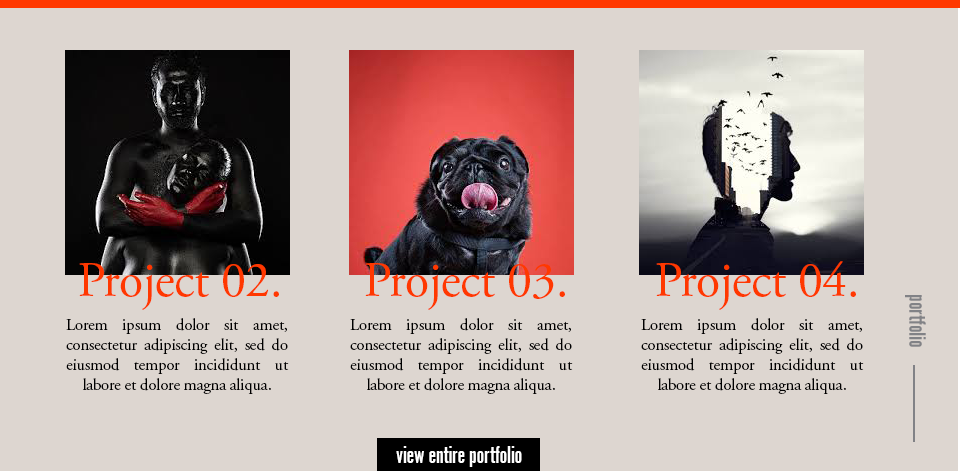
<style>
.page{position:relative;width:960px;height:471px;background:#ddd6d0}
.page>*{position:absolute;margin:0}
.t1{font:50px "AGaramondPro-Regular";letter-spacing:-0.01em;color:#ff3800}
.t2{font:24.9px "AlternateGotNo1D";letter-spacing:-0.01em;color:#818286}
.t3{font:16.7px "AGaramondPro-Regular";letter-spacing:-0.01em;color:#000000}
.t4{font:25px "AlternateGotNo1D";letter-spacing:-0.01em;color:#ffffff}
</style>
<div class="page">
<p class="t1" style="left:79px;top:263px;width:200px;height:47px">Project 02.</p>
<p class="t1" style="left:365px;top:263px;width:200px;height:47px">Project 03.</p>
<p class="t1" style="left:656px;top:261px;width:200px;height:49px">Project 04.</p>
<p class="t2" style="left:905px;top:295px;width:21px;height:52px;rotate:90deg">portfolio</p>
<p class="t3" style="left:66px;top:318px;width:223px;height:76px;text-align:justify">Lorem ipsum dolor sit amet, consectetur adipiscing elit, sed do eiusmod tempor incididunt ut labore et dolore magna aliqua.</p>
<p class="t3" style="left:350px;top:318px;width:223px;height:76px;text-align:justify">Lorem ipsum dolor sit amet, consectetur adipiscing elit, sed do eiusmod tempor incididunt ut labore et dolore magna aliqua.</p>
<p class="t3" style="left:641px;top:318px;width:223px;height:76px;text-align:justify">Lorem ipsum dolor sit amet, consectetur adipiscing elit, sed do eiusmod tempor incididunt ut labore et dolore magna aliqua.</p>
<p class="t4" style="left:396px;top:446px;width:126px;height:21px">view entire portfolio</p>
</div>
